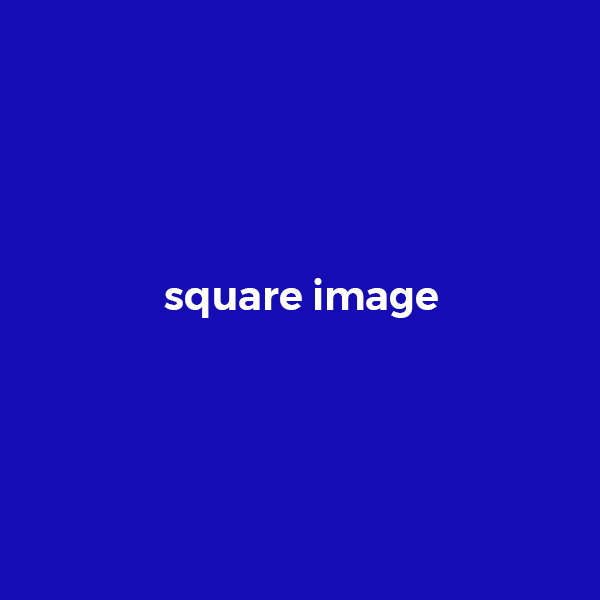
<style>
.page{position:relative;width:600px;height:600px;background:#150cb4}
.page>*{position:absolute;margin:0}
.t1{font:40px "Montserrat-SemiBold";color:#ffffff}
</style>
<div class="page">
<p class="t1" style="left:164px;top:278px;width:274px;height:40px">square image</p>
</div>
